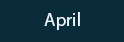
<style>
.page{position:relative;width:124px;height:42px;background:#0a2b39}
.page>*{position:absolute;margin:0}
.t1{font:18.5px "MyriadPro-Regular";color:#f0f9ff}
</style>
<div class="page">
<p class="t1" style="left:44px;top:12px;width:36px;height:18px">April</p>
</div>
